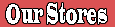
<style>
.page{position:relative;width:115px;height:27px;background:#db5253}
.page>*{position:absolute;margin:0}
.t1{font:28.9px "LatinWide";color:#ffffff;scale:0.38 1}
</style>
<div class="page">
<p class="t1" style="left:6px;top:3px;width:101px;height:21px">Our Stores</p>
</div>
